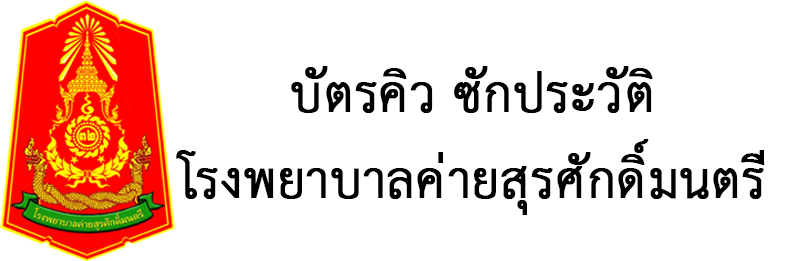
<style>
.page{position:relative;width:800px;height:261px;background:#ffffff}
.page>*{position:absolute;margin:0}
.t1{font:72px "THSarabunPSK";letter-spacing:-0.005em;color:#000000;font-weight:bold}
</style>
<div class="page">
<p class="t1" style="left:176px;top:66px;width:589px;height:149px;text-align:center">บัตรคิว ซักประวัติ<br>โรงพยาบาลค่ายสุรศักดิ์มนตรี</p>
</div>
